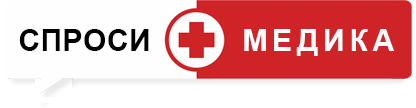
<style>
.page{position:relative;width:416px;height:108px;background:#fefefe}
.page>*{position:absolute;margin:0}
.t1{font:30px "Arial-BoldMT";letter-spacing:0.02em;color:#000000}
.t2{font:30px "Arial-BoldMT";letter-spacing:0.16em;color:#fefefe}
</style>
<div class="page">
<p class="t1" style="left:19px;top:29px;width:130px;height:22px">СПРОСИ</p>
<p class="t2" style="left:244px;top:29px;width:150px;height:27px">МЕДИКА</p>
</div>
